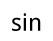
<style>
.page{position:relative;width:53px;height:41px;background:#ffffff}
.page>*{position:absolute;margin:0}
.t1{font:23.7px "DroidSans";color:#000000}
</style>
<div class="page">
<p class="t1" style="left:12px;top:13px;width:29px;height:18px">sin</p>
</div>
